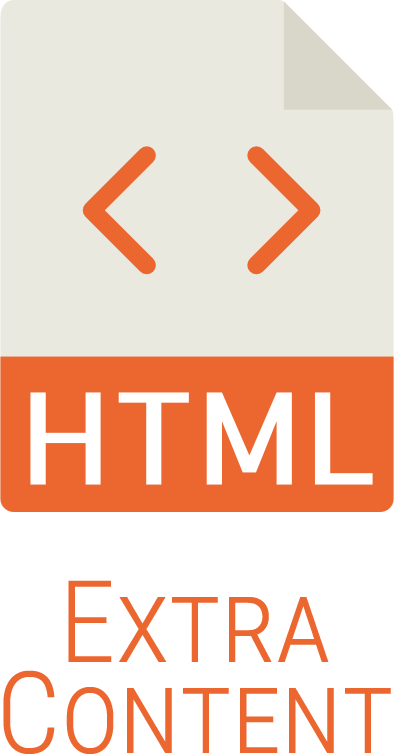
<style>
.page{position:relative;width:394px;height:754px;background:#e9e9e0}
.page>*{position:absolute;margin:0}
.t1{font:114.3px/91.4px "RobotoCondensed-Light";color:#ec6630;font-variant:small-caps}
</style>
<div class="page">
<p class="t1" style="left:3px;top:580px;width:388px;height:174px;text-align:center">Extra<br>Content</p>
</div>
